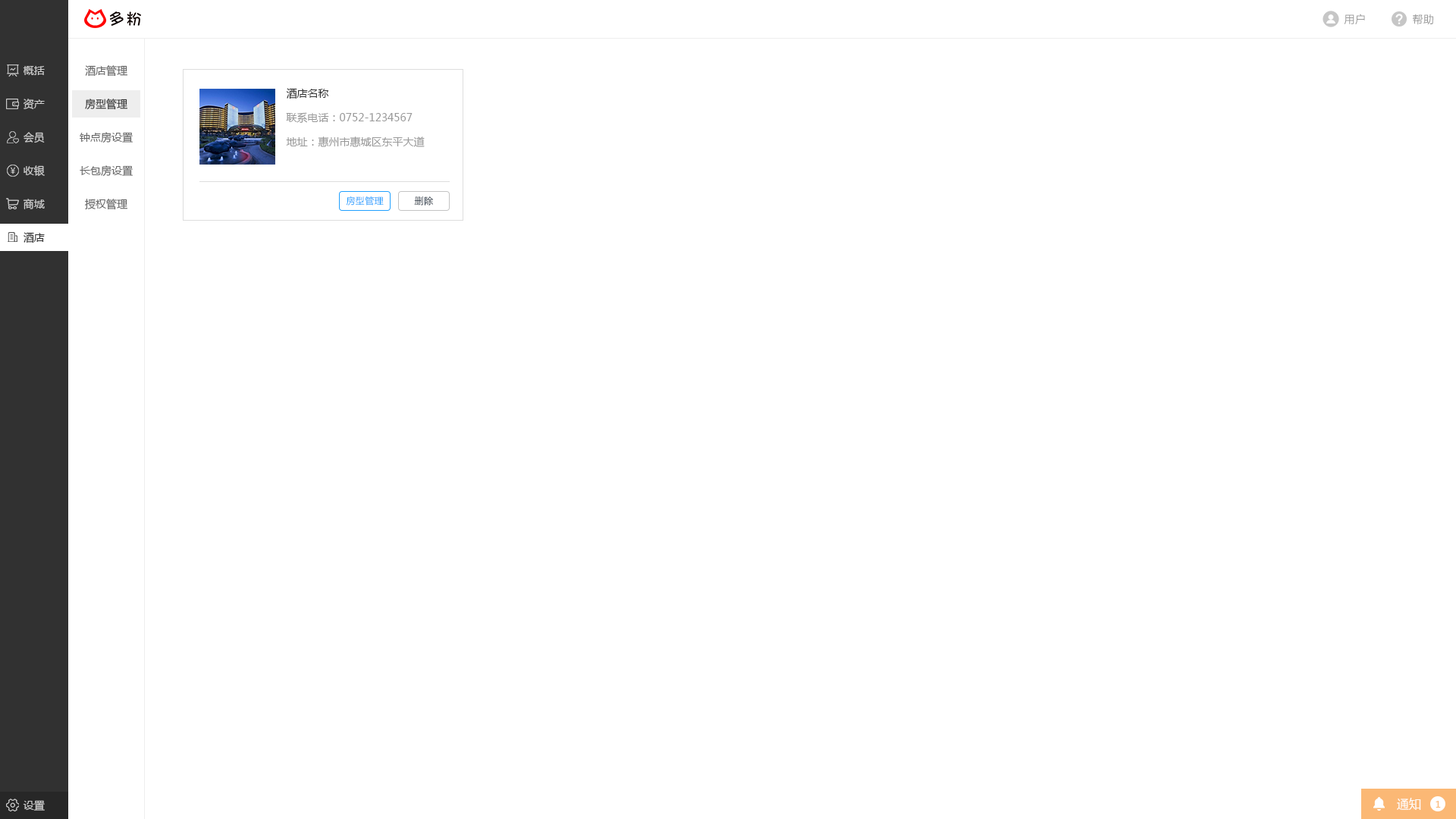
<style>
.page{position:relative;width:1456px;height:819px;background:#ffffff}
.page>*{position:absolute;margin:0}
.t1{font:10.6px "MicrosoftYaHei";letter-spacing:0.025em;color:#999999}
.t2{font:10.6px "MicrosoftYaHei";color:#cccccc}
.t3{font:10.6px "MicrosoftYaHei";color:#666666}
.t4{font:10.6px "MicrosoftYaHei";color:#333333}
.t5{font:10.6px "MicrosoftYaHei";color:#999999}
.t6{font:9.1px "MicrosoftYaHei";letter-spacing:0.025em;color:#20a0ff}
.t7{font:9.1px "MicrosoftYaHei";letter-spacing:0.025em;color:#1f2d3d}
.t8{font:10.6px "MicrosoftYaHei";color:#313131}
.t9{font:12.1px "MicrosoftYaHei";color:#ffffff}
.t10{font:9.1px "MicrosoftYaHei";color:#fbb875}
</style>
<div class="page">
<p class="t1" style="left:1344px;top:14px;width:21px;height:11px">用户</p>
<p class="t1" style="left:1413px;top:14px;width:20px;height:11px">帮助</p>
<p class="t2" style="left:23px;top:66px;width:22px;height:9px">概括</p>
<p class="t3" style="left:85px;top:65px;width:42px;height:12px">酒店管理</p>
<p class="t4" style="left:286px;top:88px;width:43px;height:11px">酒店名称</p>
<p class="t2" style="left:24px;top:99px;width:21px;height:10px">资产</p>
<p class="t4" style="left:85px;top:99px;width:42px;height:11px">房型管理</p>
<p class="t5" style="left:286px;top:112px;width:127px;height:11px">联系电话：0752-1234567</p>
<p class="t2" style="left:24px;top:132px;width:21px;height:11px">会员</p>
<p class="t3" style="left:80px;top:132px;width:53px;height:11px">钟点房设置</p>
<p class="t5" style="left:286px;top:136px;width:139px;height:11px">地址：惠州市惠城区东平大道</p>
<p class="t2" style="left:24px;top:165px;width:21px;height:11px">收银</p>
<p class="t3" style="left:80px;top:165px;width:53px;height:12px">长包房设置</p>
<p class="t6" style="left:346px;top:196px;width:38px;height:10px">房型管理</p>
<p class="t7" style="left:414px;top:196px;width:20px;height:10px">删除</p>
<p class="t2" style="left:23px;top:199px;width:22px;height:10px">商城</p>
<p class="t3" style="left:85px;top:199px;width:42px;height:11px">授权管理</p>
<p class="t8" style="left:24px;top:232px;width:21px;height:11px">酒店</p>
<p class="t9" style="left:1397px;top:798px;width:24px;height:12px">通知</p>
<p class="t2" style="left:23px;top:800px;width:22px;height:11px">设置</p>
<p class="t10" style="left:1436px;top:801px;width:5px;height:7px">1</p>
</div>
